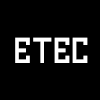
<style>
.page{position:relative;width:100px;height:100px;background:#000000}
.page>*{position:absolute;margin:0}
.t1{font:36px "HomespunTTBRK";color:#ffffff}
</style>
<div class="page">
<p class="t1" style="left:15px;top:37px;width:73px;height:26px">ETEC</p>
</div>
